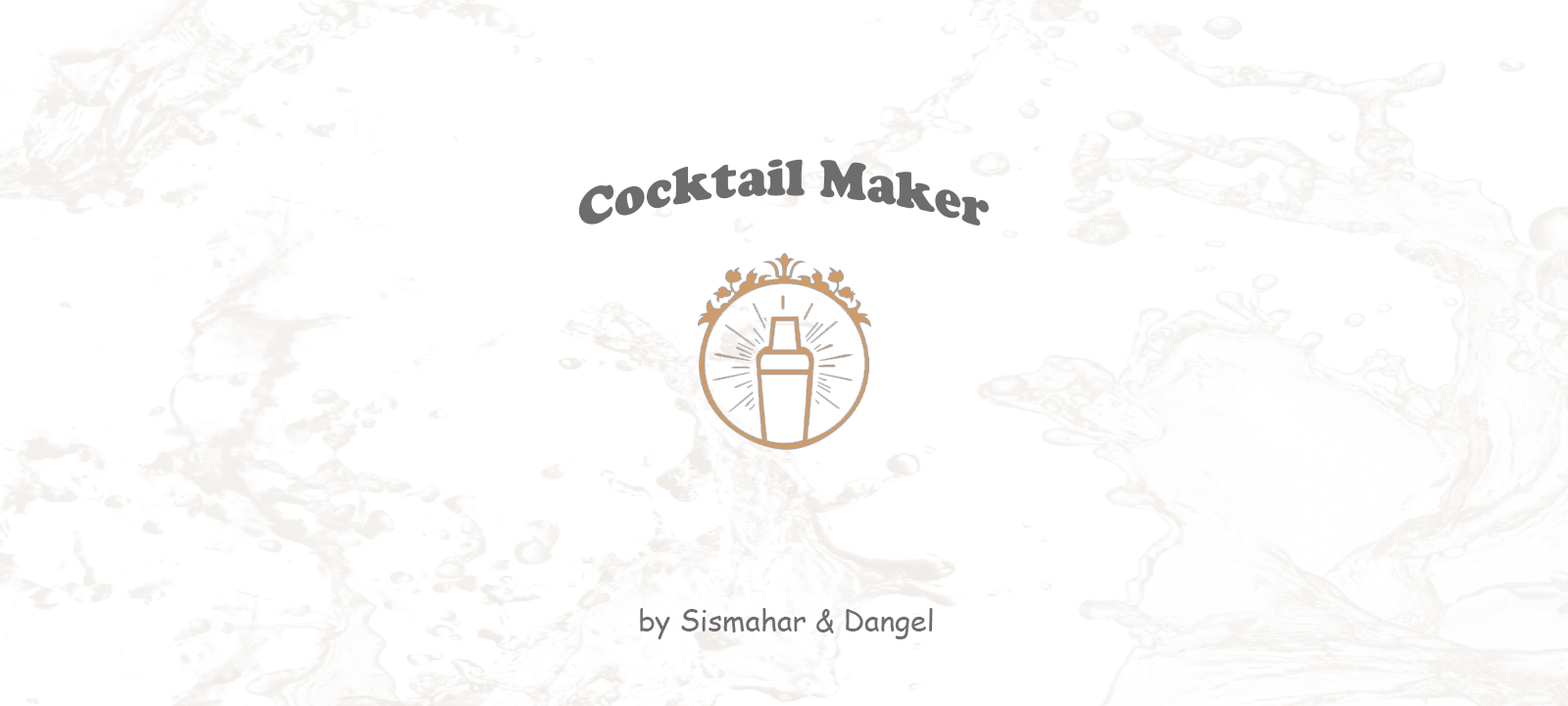
<style>
.page{position:relative;width:1568px;height:706px;background:#ffffff}
.page>*{position:absolute;margin:0}
.t1{font:52.8px "CooperBlack";color:#6d6c6e}
.t2{font:29.4px "ComicSansMS";color:#6d6c6e}
</style>
<div class="page">
<p class="t1" style="left:578px;top:159px;width:411px;height:66px">Cocktail Maker</p>
<p class="t2" style="left:640px;top:608px;width:293px;height:31px">by Sismahar &amp; Dangel</p>
</div>
